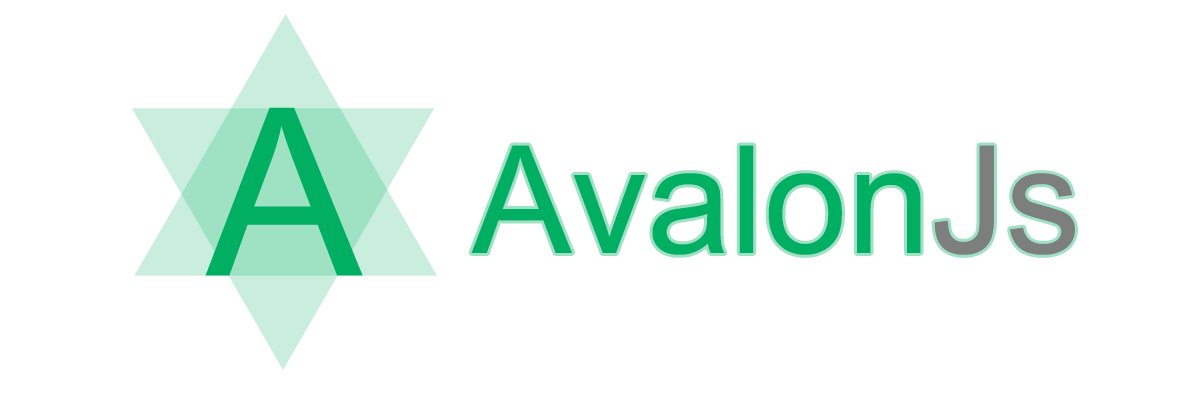
<style>
.page{position:relative;width:1200px;height:400px;background:#ffffff}
.page>*{position:absolute;margin:0}
.t1{font:234px "ArialMT";color:#00af62}
.t2{font:150px "ArialMT";color:#00af62}
.t3{font:150px "ArialMT";color:#7d7f7e}
</style>
<div class="page">
<p class="t1" style="left:205px;top:107px;width:158px;height:169px">A</p>
<p class="t2" style="left:471px;top:145px;width:604px;height:110px">Avalon<span class="t3">Js</span></p>
</div>
